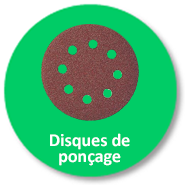
<style>
.page{position:relative;width:185px;height:185px;background:#00cc66}
.page>*{position:absolute;margin:0}
.t1{font:18px/16px "Calibri-Bold";color:#ffffff}
</style>
<div class="page">
<p class="t1" style="left:50px;top:133px;width:80px;height:33px;text-align:center">Disques de  <br>ponçage</p>
</div>
